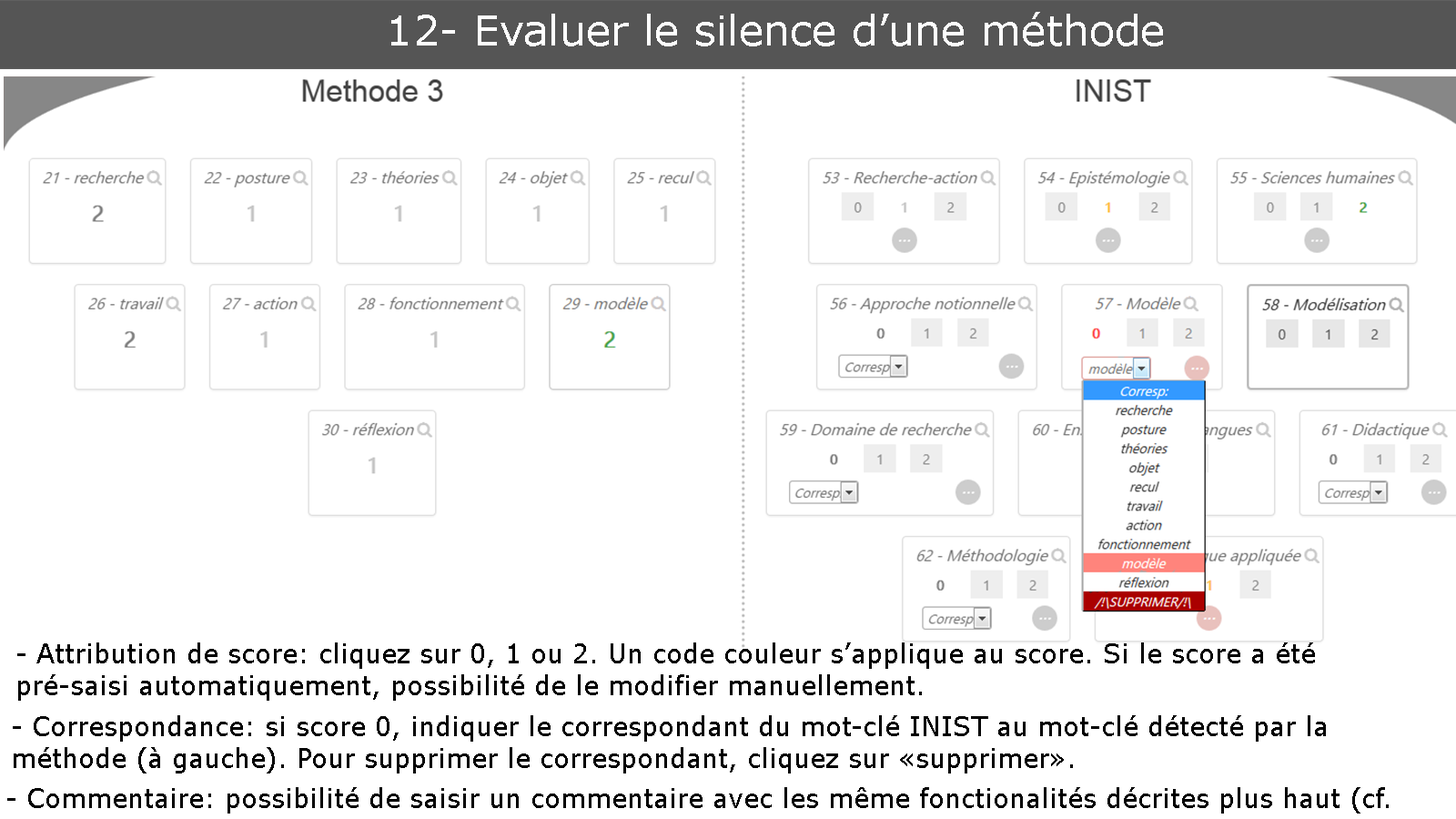
<style>
.page{position:relative;width:1456px;height:819px;background:#ffffff}
.page>*{position:absolute;margin:0}
.t1{font:41.7px "Verdana";color:#ffffff}
.t2{font:26.5px "Verdana";color:#000000}
</style>
<div class="page">
<p class="t1" style="left:391px;top:12px;width:772px;height:34px">12- Evaluer le silence d’une méthode</p>
<p class="t2" style="left:17px;top:642px;width:1298px;height:59px">- Attribution de score: cliquez sur 0, 1 ou 2. Un code couleur s’applique au score. Si le score a été pré-saisi automatiquement, possibilité de le modifier manuellement.</p>
<p class="t2" style="left:13px;top:715px;width:1313px;height:58px">- Correspondance: si score 0, indiquer le correspondant du mot-clé INIST au mot-clé détecté par la méthode (à gauche). Pour supprimer le correspondant, cliquez sur «supprimer».</p>
<p class="t2" style="left:7px;top:787px;width:1382px;height:27px">- Commentaire: possibilité de saisir un commentaire avec les même fonctionalités décrites plus haut (cf. ...)</p>
</div>
